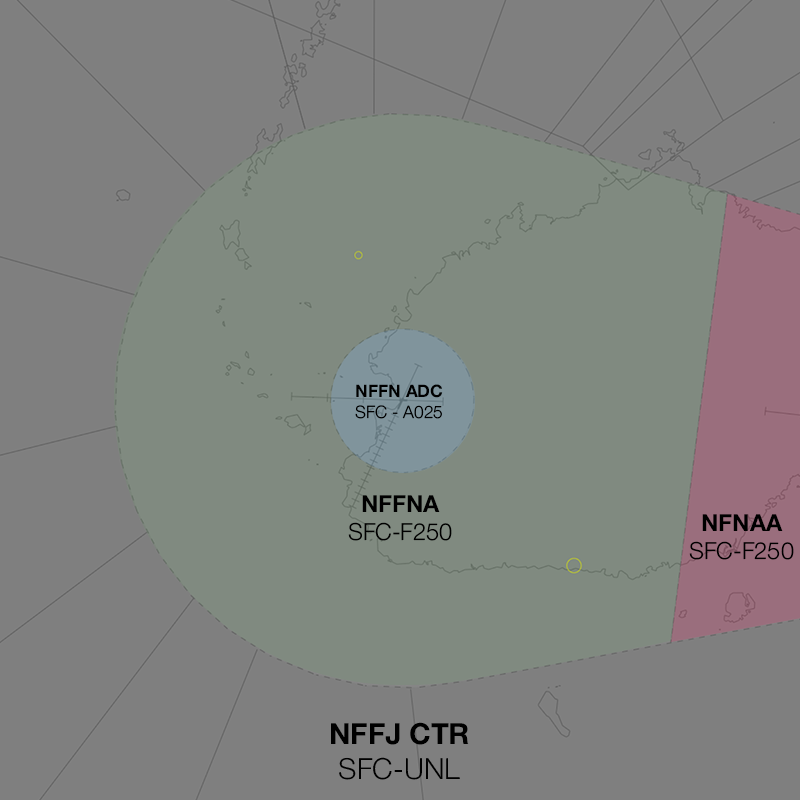
<style>
.page{position:relative;width:800px;height:800px;background:#7f7f7f}
.page>*{position:absolute;margin:0}
.t1{font:17.2px "HelveticaNeue-Light";color:#000000}
.t2{font:17.2px "HelveticaNeue-Bold";color:#000000}
.t3{font:23.6px "HelveticaNeue-Light";color:#000000}
.t4{font:23.6px "HelveticaNeue-Bold";color:#000000}
.t5{font:29.1px "HelveticaNeue-Bold";color:#000000}
.t6{font:29.1px "HelveticaNeue-Light";color:#000000}
</style>
<div class="page">
<p class="t1" style="left:355px;top:384px;width:88px;height:35px;text-align:center"><span class="t2">NFFN ADC<br></span>SFC - A025</p>
<p class="t3" style="left:348px;top:495px;width:104px;height:46px;text-align:center"><span class="t4">NFFNA<br></span>SFC-F250</p>
<p class="t3" style="left:689px;top:514px;width:105px;height:46px;text-align:center"><span class="t4">NFNAA<br></span>SFC-F250</p>
<p class="t5" style="left:331px;top:722px;width:138px;height:58px;text-align:center">NFFJ CTR<br><span class="t6">SFC-UNL</span></p>
</div>
